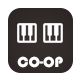
<style>
.page{position:relative;width:80px;height:80px;background:#ffffff}
.page>*{position:absolute;margin:0}
.t1{font:15px "Bauhaus93";color:#ffffff}
</style>
<div class="page">
<p class="t1" style="left:17px;top:56px;width:46px;height:12px">CO-OP</p>
</div>
